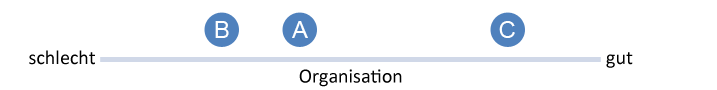
<style>
.page{position:relative;width:717px;height:90px;background:#ffffff}
.page>*{position:absolute;margin:0}
.t1{font:24px "ArialMT";color:#ffffff}
.t2{font:20px "Calibri";color:#000000}
</style>
<div class="page">
<p class="t1" style="left:215px;top:21px;width:14px;height:17px">B</p>
<p class="t1" style="left:292px;top:21px;width:16px;height:17px">A</p>
<p class="t1" style="left:499px;top:21px;width:16px;height:17px">C</p>
<p class="t2" style="left:29px;top:50px;width:66px;height:15px">schlecht</p>
<p class="t2" style="left:606px;top:52px;width:27px;height:16px">gut</p>
<p class="t2" style="left:299px;top:69px;width:103px;height:18px">Organisation</p>
</div>
